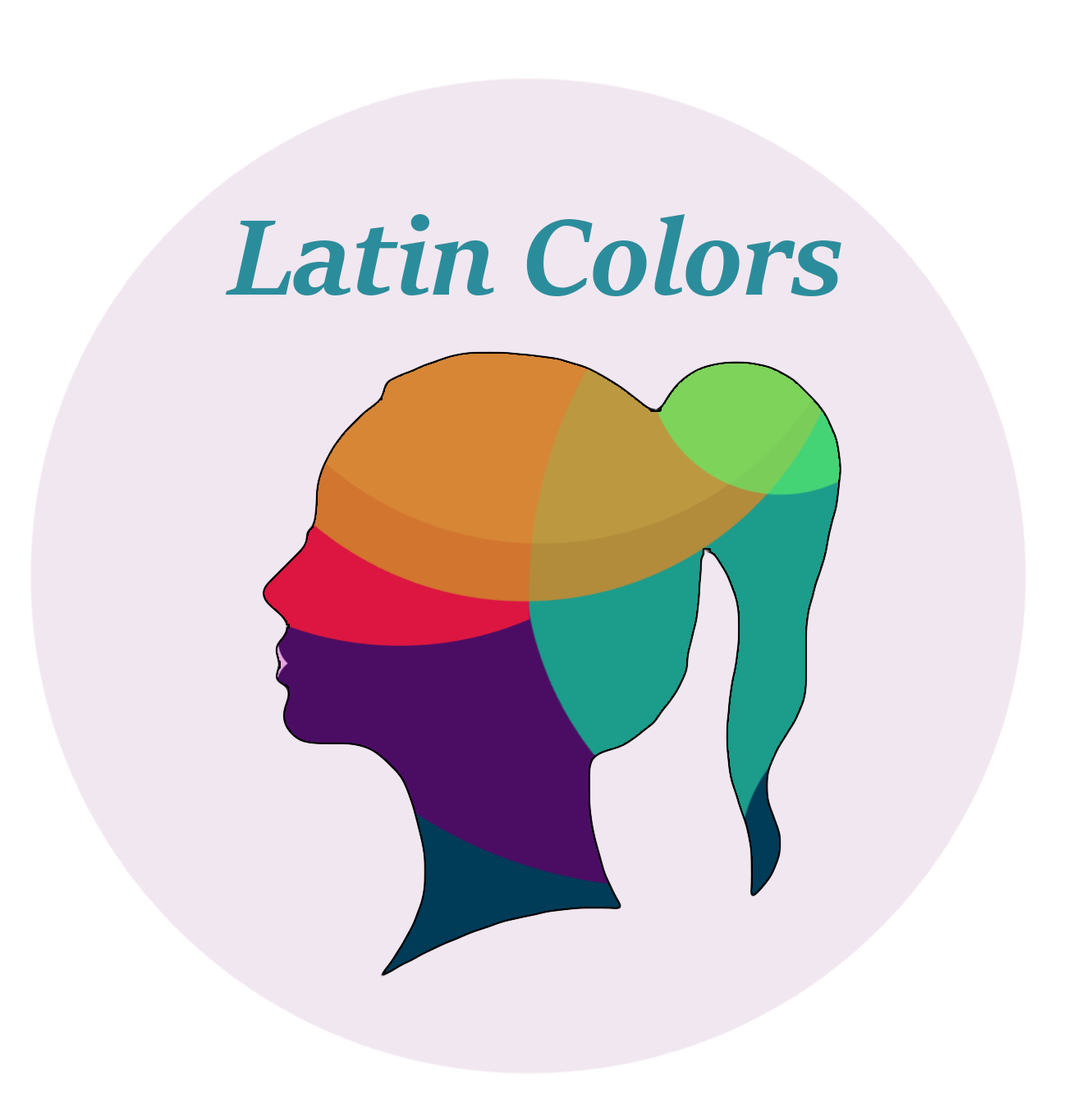
<style>
.page{position:relative;width:1068px;height:1116px;background:#f1e7f0}
.page>*{position:absolute;margin:0}
.t1{font:120.1px "SitkaDisplay-BoldItalic";color:#2b8d9c}
</style>
<div class="page">
<p class="t1" style="left:225px;top:213px;width:616px;height:83px">Latin Colors</p>
</div>
